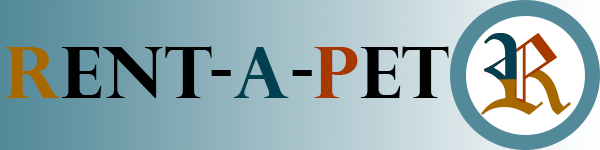
<style>
.page{position:relative;width:600px;height:150px}
.page>*{position:absolute;margin:0}
.t1{font:111.2px "OldEnglishTextMT"}
.t2{font:71.2px "PerpetuaTitlingMT-Bold";color:#000000}
.t3{font:71.2px "PerpetuaTitlingMT-Bold";color:#a76800}
.t4{font:71.2px "PerpetuaTitlingMT-Bold";color:#023f50}
.t5{font:71.2px "PerpetuaTitlingMT-Bold";color:#a73800}
</style>
<div class="page">
<p class="t1" style="left:481px;top:33px;width:91px;height:82px">R</p>
<p class="t2" style="left:5px;top:46px;width:444px;height:52px"><span class="t3">R</span>ent-<span class="t4">A</span>-<span class="t5">P</span>et</p>
</div>
